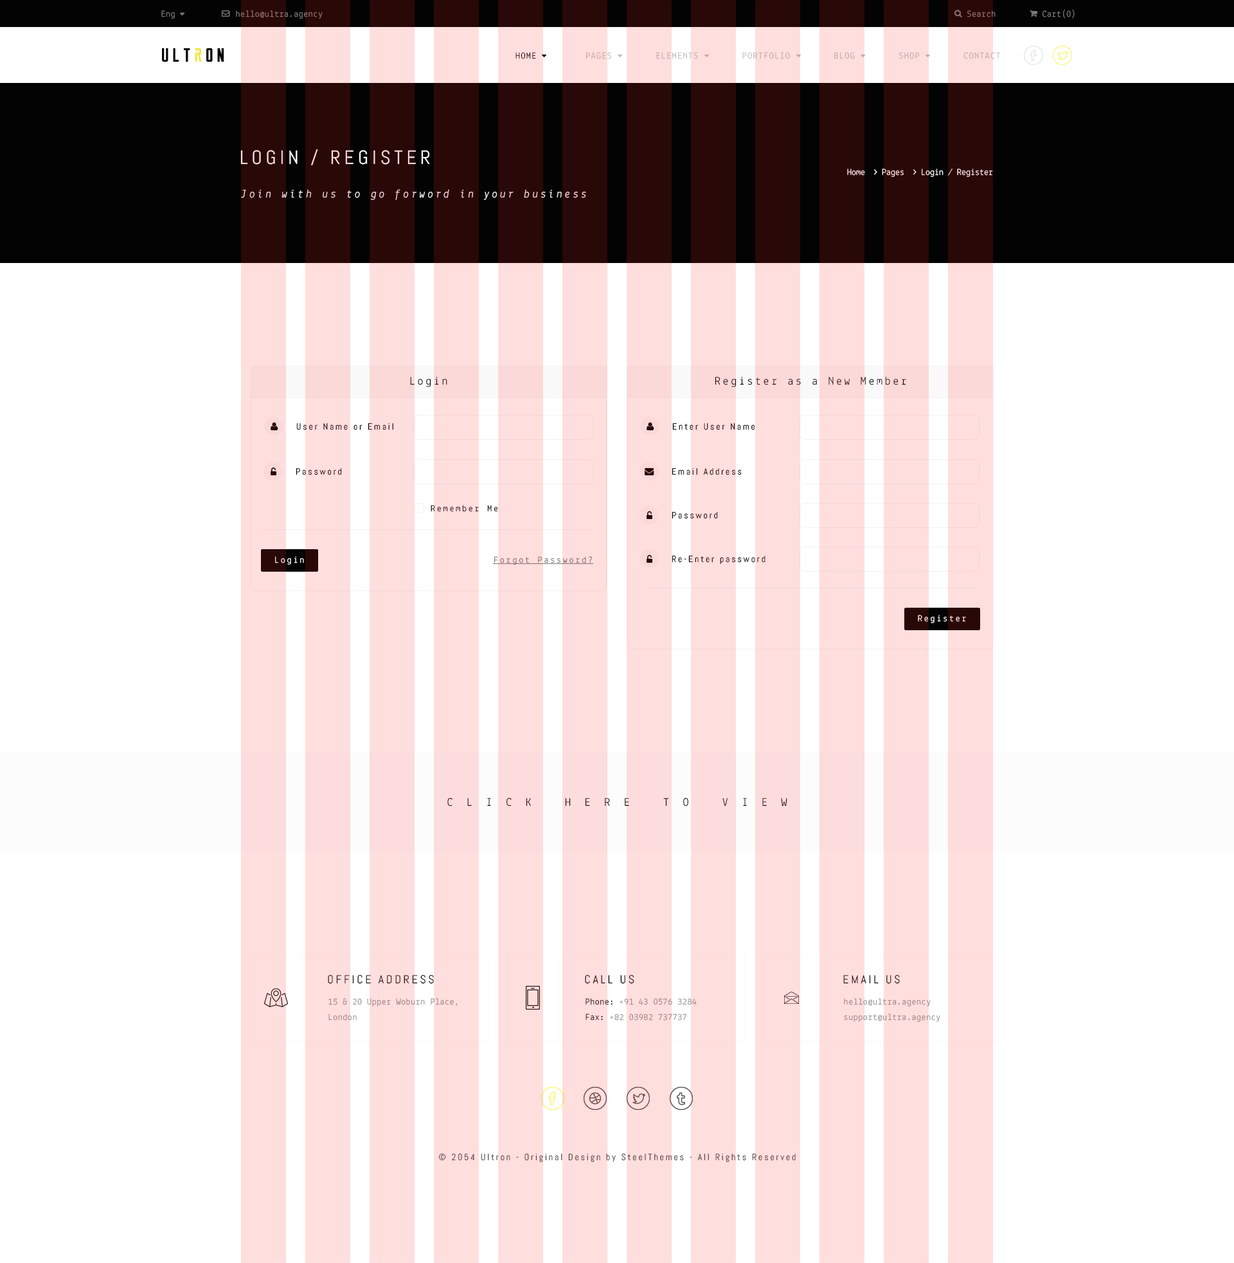
<style>
.page{position:relative;width:1234px;height:1263px;background:#ffffff}
.page>*{position:absolute;margin:0}
.t1{font:9px "Lekton-Regular";letter-spacing:0.04em;color:#787878}
.t2{font:9px "Lekton-Regular";letter-spacing:0.1em;color:#bfbfbf;text-transform:uppercase}
.t3{font:9px "Lekton-Regular";letter-spacing:0.1em;color:#030303;text-transform:uppercase}
.t4{font:19.3px "Abel-Regular";letter-spacing:0.2em;text-transform:uppercase}
.t5{font:11.6px "Lekton-Italic";letter-spacing:0.2em;color:#ffdede}
.t6{font:11.6px "Lekton-Regular";letter-spacing:0.2em}
.t7{font:11.6px "Lekton-Regular";letter-spacing:0.2em;color:#290808}
.t8{font:9px "Abel-Regular";letter-spacing:0.2em;color:#030303}
.t9{font:9px "Abel-Regular";letter-spacing:0.2em}
.t10{font:9px "Lekton-Regular";letter-spacing:0.2em;color:#030303}
.t11{font:9px "Lekton-Regular";letter-spacing:0.2em;color:#ffdede}
.t12{font:9px "Lekton-Regular";letter-spacing:0.2em;color:#8c6b6b}
.t13{font:9px "Lekton-Regular";letter-spacing:0.2em}
.t14{font:11.6px "Lekton-Regular";letter-spacing:1.2em;color:#290808;text-transform:uppercase}
.t15{font:11.6px "Abel-Regular";letter-spacing:0.2em;text-transform:uppercase}
.t16{font:9px/15.4px "Lekton-Regular";letter-spacing:0.04em;color:#969595}
.t17{font:9px/15.4px "Lekton-Regular";letter-spacing:0.04em;color:#030303}
.t18{font:9px "Abel-Regular";letter-spacing:0.2em;color:#694848}
</style>
<div class="page">
<p class="t1" style="left:161px;top:10px;width:14px;height:9px">Eng</p>
<p class="t1" style="left:236px;top:10px;width:87px;height:9px">hello@ultra.agency</p>
<p class="t1" style="left:968px;top:10px;width:28px;height:7px">Search</p>
<p class="t1" style="left:1043px;top:9px;width:32px;height:10px">Cart(0)</p>
<p class="t2" style="left:516px;top:52px;width:484px;height:7px"><span class="t3">Home         </span>Pages        Elements        Portfolio        Blog        Shop        Contact</p>
<p class="t4" style="left:240px;top:149px;width:190px;height:16px">login / register</p>
<p class="t5" style="left:241px;top:189px;width:345px;height:11px">Join with us to go forword in your business</p>
<p class="t6" style="left:410px;top:377px;width:37px;height:10px">Login</p>
<p class="t7" style="left:715px;top:376px;width:191px;height:11px">Register as a New Member</p>
<p class="t8" style="left:296px;top:423px;width:97px;height:7px">User Name or Email</p>
<p class="t9" style="left:672px;top:423px;width:83px;height:7px">Enter User Name</p>
<p class="t8" style="left:296px;top:468px;width:46px;height:7px">Password</p>
<p class="t9" style="left:672px;top:468px;width:70px;height:7px">Email Address</p>
<p class="t10" style="left:431px;top:505px;width:67px;height:7px">Remember Me</p>
<p class="t8" style="left:672px;top:512px;width:46px;height:7px">Password</p>
<p class="t11" style="left:275px;top:556px;width:29px;height:8px">Login</p>
<p class="t12" style="left:494px;top:556px;width:99px;height:8px">Forgot Password?</p>
<p class="t8" style="left:672px;top:555px;width:94px;height:9px">Re-Enter password</p>
<p class="t13" style="left:918px;top:615px;width:48px;height:8px">Register</p>
<p class="t14" style="left:447px;top:797px;width:341px;height:9px">Click here to view</p>
<p class="t15" style="left:328px;top:975px;width:106px;height:9px">Office Address</p>
<p class="t15" style="left:585px;top:975px;width:49px;height:9px">Call us</p>
<p class="t15" style="left:843px;top:975px;width:57px;height:9px">Email us</p>
<p class="t16" style="left:328px;top:998px;width:130px;height:22px">15 &amp; 20 Upper Woburn Place,<br>London</p>
<p class="t16" style="left:586px;top:998px;width:111px;height:22px"><span class="t17">Phone:</span> +91 43 0576 3284<br><span class="t17">Fax:</span> +82 03982 737737</p>
<p class="t16" style="left:844px;top:998px;width:97px;height:24px">hello@ultra.agency<br>support@ultra.agency</p>
<p class="t18" style="left:438px;top:1153px;width:358px;height:9px">© 2054 Ultron - Original Design by SteelThemes - All Rights Reserved</p>
</div>
